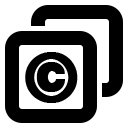
<style>
.page{position:relative;width:128px;height:128px;background:#000000}
.page>*{position:absolute;margin:0}
.t1{font:72px "Latin";letter-spacing:0.2em;color:#000000;font-weight:bold}
</style>
<div class="page">
<p class="t1" style="left:25px;top:52px;width:53px;height:51px">©</p>
</div>
